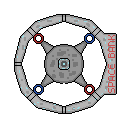
<style>
.page{position:relative;width:128px;height:128px;background:#ffffff}
.page>*{position:absolute;margin:0}
.t1{font:15px "PixelromHD";color:#c94e4e}
</style>
<div class="page">
<p class="t1" style="left:108px;top:35px;width:7px;height:58px;rotate:-90deg">SPACE BANK</p>
</div>
